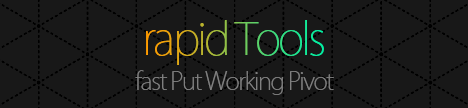
<style>
.page{position:relative;width:468px;height:108px;background:#181818}
.page>*{position:absolute;margin:0}
.t1{font:44.1px "KozGoPr6N-ExtraLight";letter-spacing:-0.06em}
.t2{font:24.1px "KozGoPr6N-ExtraLight";letter-spacing:-0.06em;color:#7f7f7f}
</style>
<div class="page">
<p class="t1" style="left:146px;top:20px;width:178px;height:45px">rapid Tools</p>
<p class="t2" style="left:135px;top:70px;width:199px;height:25px">fast Put Working Pivot</p>
</div>
